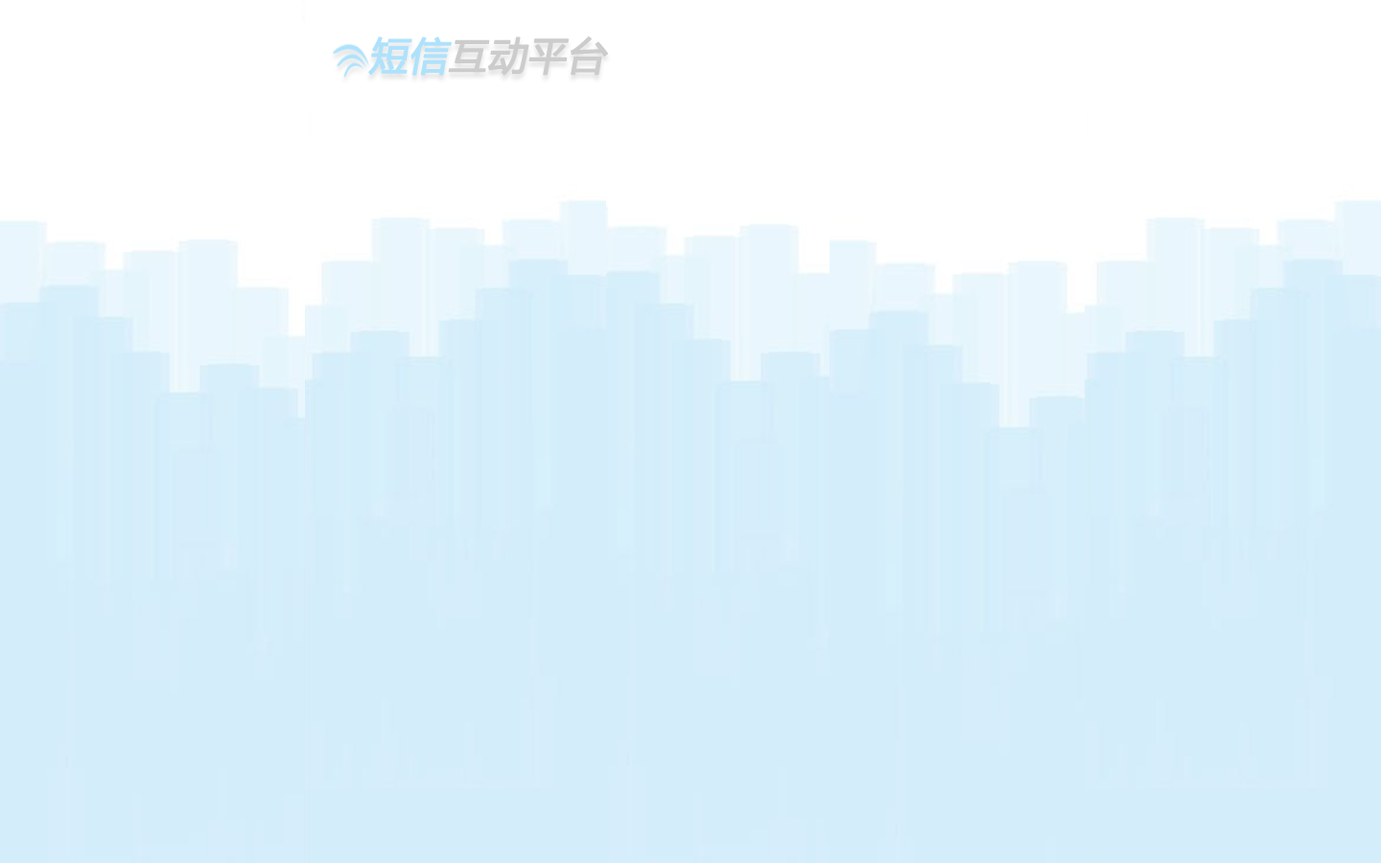
<style>
.page{position:relative;width:1381px;height:863px;background:#d3edfa}
.page>*{position:absolute;margin:0}
.t1{font:38.4px "MicrosoftYaHei";color:#cccccc;font-weight:bold;font-style:italic}
.t2{font:38.4px "MicrosoftYaHei";color:#aee2fc;font-weight:bold;font-style:italic}
</style>
<div class="page">
<p class="t1" style="left:368px;top:36px;width:240px;height:40px"><span class="t2">短信</span>互动平台</p>
</div>
